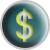
<style>
.page{position:relative;width:50px;height:50px}
.page>*{position:absolute;margin:0}
.t1{font:37.5px "Mangal-Bold";letter-spacing:-0.05em}
</style>
<div class="page">
<p class="t1" style="left:15px;top:8px;width:19px;height:34px">$</p>
</div>
